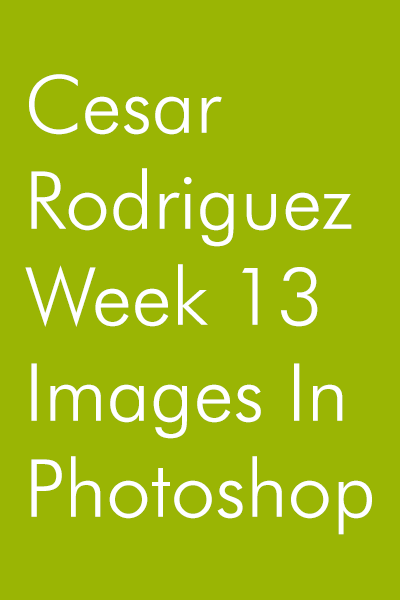
<style>
.page{position:relative;width:400px;height:600px;background:#9ab504}
.page>*{position:absolute;margin:0}
.t1{font:80px "FuturaBT-Light";color:#ffffff}
</style>
<div class="page">
<p class="t1" style="left:25px;top:74px;width:347px;height:461px">Cesar<br>Rodriguez<br>Week 13<br>Images In<br>Photoshop</p>
</div>
